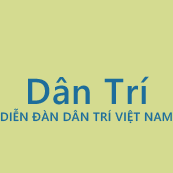
<style>
.page{position:relative;width:173px;height:173px;background:#d4db90}
.page>*{position:absolute;margin:0}
.t1{font:36px "SegoeWP-Semibold";letter-spacing:0.025em;color:#1d6d9b}
.t2{font:12px "SegoeWP-Semibold";letter-spacing:0.025em;color:#1d6d9b}
</style>
<div class="page">
<p class="t1" style="left:28px;top:76px;width:121px;height:29px">Dân Trí</p>
<p class="t2" style="left:0px;top:108px;width:172px;height:16px">DIỄN ĐÀN DÂN TRÍ VIỆT NAM</p>
</div>
